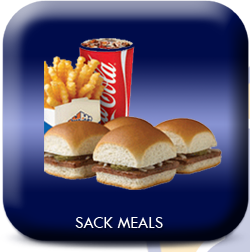
<style>
.page{position:relative;width:250px;height:252px}
.page>*{position:absolute;margin:0}
.t1{font:16.7px "TwCenMT-Regular";letter-spacing:0.01em;color:#ffffff;font-variant:small-caps}
</style>
<div class="page">
<p class="t1" style="left:75px;top:217px;width:88px;height:11px">SACK MEALS</p>
</div>
